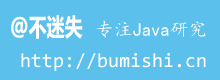
<style>
.page{position:relative;width:220px;height:80px;background:#5bc0eb}
.page>*{position:absolute;margin:0}
.t1{font:24px "MicrosoftYaHei-Bold";color:#ffffff;scale:0.75 1}
.t2{font:18.7px "¿¬Ìå";color:#ffffff}
.t3{font:20px "Consolas";color:#ffffff}
</style>
<div class="page">
<p class="t1" style="left:11px;top:15px;width:72px;height:24px">@不迷失</p>
<p class="t2" style="left:96px;top:20px;width:110px;height:18px">专注Java研究</p>
<p class="t3" style="left:21px;top:53px;width:185px;height:18px">http://bumishi.cn</p>
</div>
